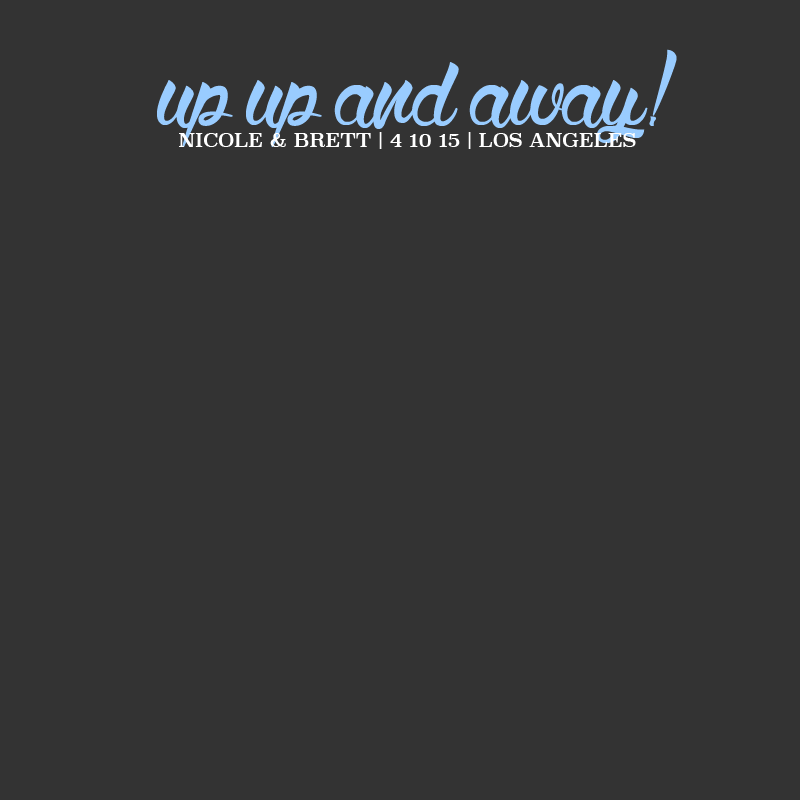
<style>
.page{position:relative;width:800px;height:800px;background:#333333}
.page>*{position:absolute;margin:0}
.t1{font:19px "Superclarendon-Regular";color:#ffffff}
.t2{font:150px "WolfintheCity";color:#99ccff}
</style>
<div class="page">
<p class="t1" style="left:157px;top:49px;width:520px;height:100px"><span class="t2">up up and away!<br></span>   NICOLE &amp; BRETT | 4 10 15 | LOS ANGELES</p>
</div>
